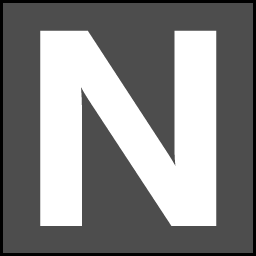
<style>
.page{position:relative;width:256px;height:256px;background:#4d4d4d}
.page>*{position:absolute;margin:0}
.t1{font:278.8px "SegoeUI-Bold";letter-spacing:-0.04em;color:#ffffff}
</style>
<div class="page">
<p class="t1" style="left:40px;top:30px;width:177px;height:196px">N</p>
</div>
